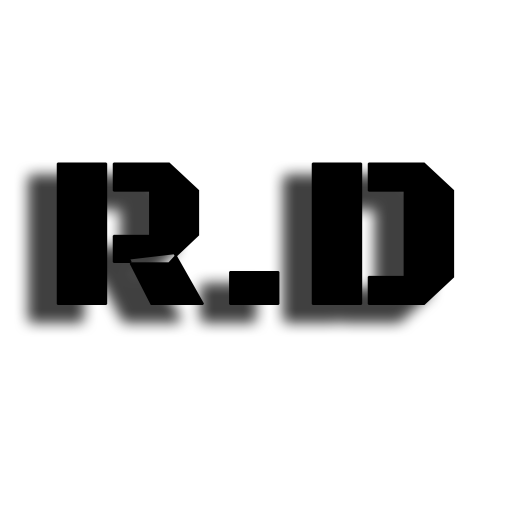
<style>
.page{position:relative;width:512px;height:512px;background:#ffffff}
.page>*{position:absolute;margin:0}
.t1{font:217.2px "BlackOpsOne-Regular";color:#000000;font-weight:bold}
</style>
<div class="page">
<p class="t1" style="left:56px;top:162px;width:399px;height:143px">R.D</p>
</div>
